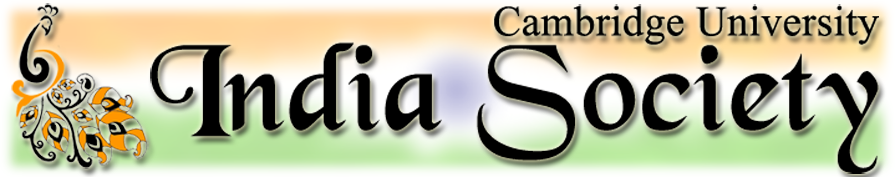
<style>
.page{position:relative;width:895px;height:177px}
.page>*{position:absolute;margin:0}
.t1{font:42.5px/94.4px "TimesNewRomanPSMT";letter-spacing:0.01em;color:#000000}
.t2{font:129.8px/94.4px "BlackChancery";letter-spacing:0.01em;color:#000000}
</style>
<div class="page">
<p class="t1" style="left:150px;top:4px;width:729px;height:170px;text-align:right">Cambridge University<br><span class="t2">India Society</span></p>
</div>
